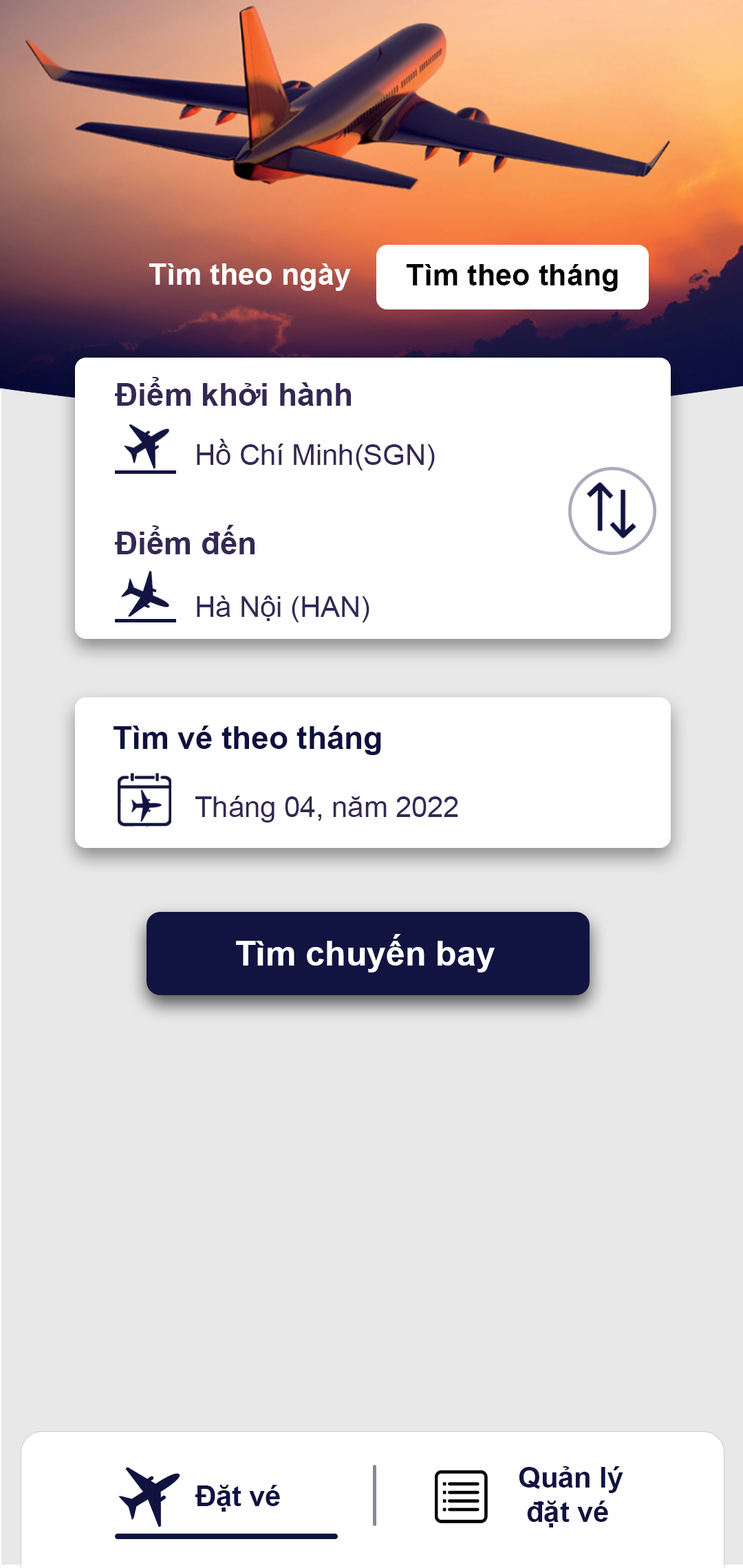
<style>
.page{position:relative;width:743px;height:1568px;background:#e8e8e8}
.page>*{position:absolute;margin:0}
.t1{font:29.8px "Arial-BoldMT";color:#ffffff}
.t2{font:29.8px "Arial-BoldMT";color:#000000}
.t3{font:31.5px "Arial-BoldMT";color:#342854}
.t4{font:28.7px "ArialMT";color:#342854}
.t5{font:31.5px "Arial-BoldMT";color:#0e113e}
.t6{font:34.4px "Arial-BoldMT";color:#ffffff}
.t7{font:28.7px "Arial-BoldMT";color:#101340}
</style>
<div class="page">
<p class="t1" style="left:149px;top:263px;width:202px;height:28px">Tìm theo ngày</p>
<p class="t2" style="left:406px;top:264px;width:212px;height:28px">Tìm theo tháng</p>
<p class="t3" style="left:115px;top:377px;width:236px;height:29px">Điểm khởi hành</p>
<p class="t4" style="left:197px;top:439px;width:238px;height:31px">Hồ Chí Minh(SGN)</p>
<p class="t3" style="left:115px;top:525px;width:139px;height:29px">Điểm đến</p>
<p class="t4" style="left:197px;top:596px;width:172px;height:26px">Hà Nội (HAN)</p>
<p class="t5" style="left:113px;top:726px;width:268px;height:29px">Tìm vé theo tháng</p>
<p class="t4" style="left:195px;top:796px;width:263px;height:27px">Tháng 04, năm 2022</p>
<p class="t6" style="left:236px;top:934px;width:258px;height:38px">Tìm chuyến bay</p>
<p class="t7" style="left:519px;top:1466px;width:104px;height:61px">Quản lý<br> đặt vé</p>
<p class="t7" style="left:195px;top:1485px;width:85px;height:27px">Đặt vé</p>
</div>
